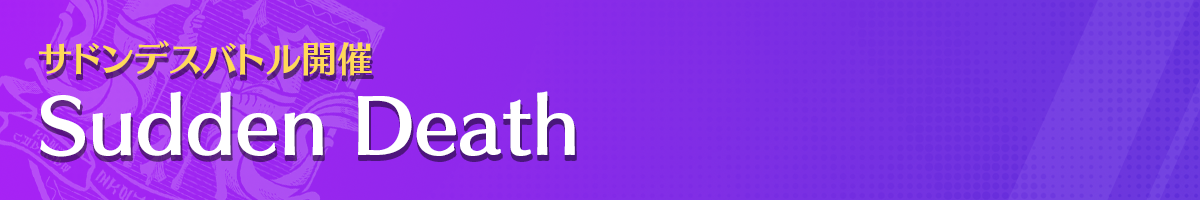
<style>
.page{position:relative;width:1200px;height:200px}
.page>*{position:absolute;margin:0}
.t1{font:72px/80px "SkipStd-B";color:#ffffff}
.t2{font:36px "SkipStd-B";color:#ffda58}
.t3{font:36px/50px "SkipStd-B";color:#ffda58}
</style>
<div class="page">
<p class="t1" style="left:38px;top:40px;width:537px;height:117px"><span class="t2"><br></span><span class="t3">サドンデスバトル開催<br></span>Sudden Death</p>
</div>
